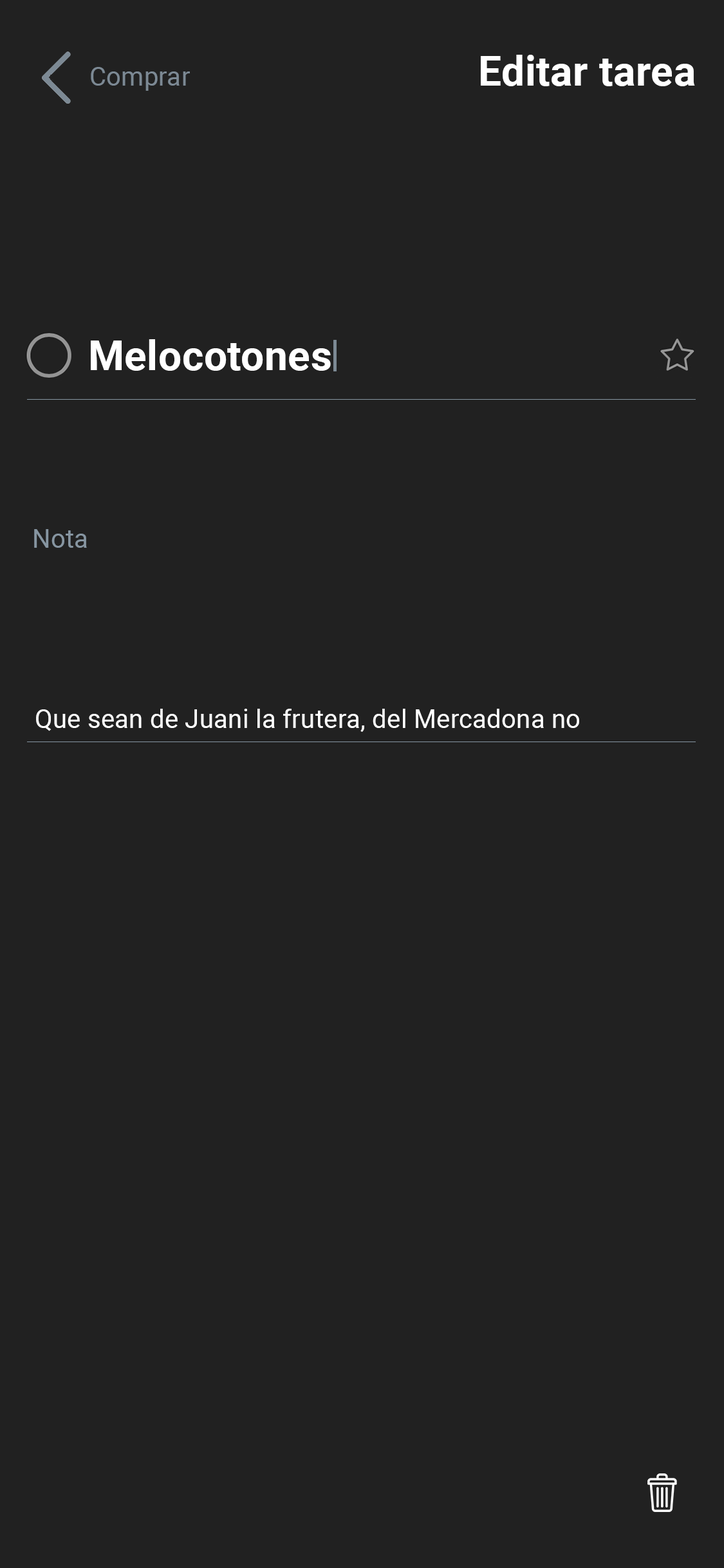
<style>
.page{position:relative;width:724px;height:1568px;background:#212121}
.page>*{position:absolute;margin:0}
.t1{font:41.2px "Roboto-Bold";letter-spacing:0.008em;color:#ffffff}
.t2{font:25.7px "Roboto-Regular";letter-spacing:0.008em;color:#7c8994}
.t3{font:25.7px "Roboto-Regular";letter-spacing:0.008em;color:#8695a1}
.t4{font:25.7px "Roboto-Regular";letter-spacing:0.008em;color:#ffffff}
</style>
<div class="page">
<p class="t1" style="left:481px;top:55px;width:214px;height:31px">Editar tarea</p>
<p class="t2" style="left:91px;top:67px;width:99px;height:24px">Comprar</p>
<p class="t1" style="left:91px;top:339px;width:240px;height:32px">Melocotones</p>
<p class="t3" style="left:34px;top:529px;width:53px;height:19px">Nota</p>
<p class="t4" style="left:36px;top:709px;width:543px;height:23px">Que sean de Juani la frutera, del Mercadona no</p>
</div>
